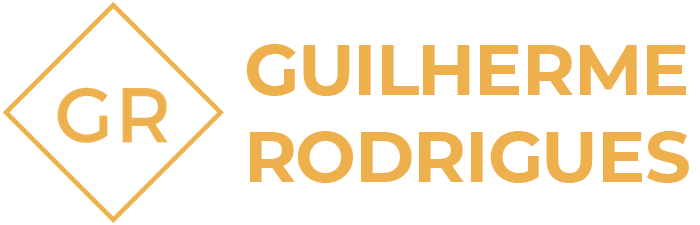
<style>
.page{position:relative;width:700px;height:225px;background:#ffffff}
.page>*{position:absolute;margin:0}
.t1{font:72px "Montserrat-Bold";color:#edb04d;text-transform:uppercase}
</style>
<div class="page">
<p class="t1" style="left:246px;top:44px;width:443px;height:139px">Guilherme<br>Rodrigues</p>
</div>
